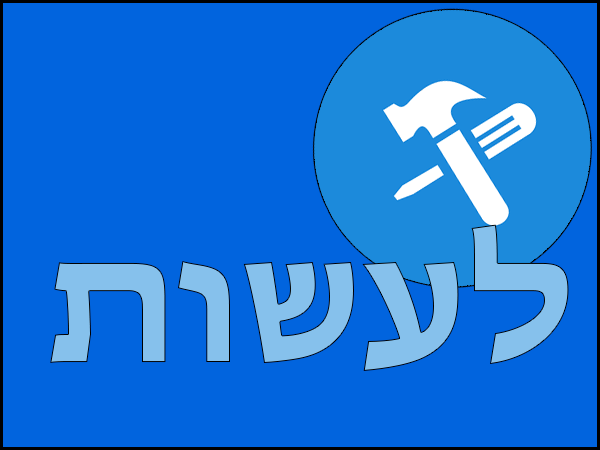
<style>
.page{position:relative;width:600px;height:450px;background:#0164de}
.page>*{position:absolute;margin:0}
.t1{font:179.2px "MyriadHebrew-Bold";color:#86c1ec}
</style>
<div class="page">
<p class="t1" style="left:50px;top:224px;width:519px;height:147px">לעשות</p>
</div>
